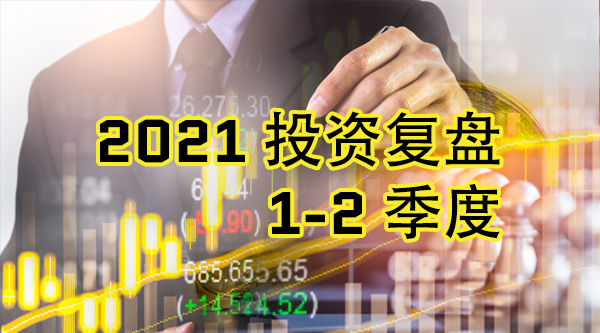
<style>
.page{position:relative;width:600px;height:333px}
.page>*{position:absolute;margin:0}
.t1{font:60px "Quantico-Bold";color:#000000}
.t2{font:60px "AdobeHeitiStd-Regular";color:#000000}
</style>
<div class="page">
<p class="t1" style="left:100px;top:111px;width:400px;height:56px">2021 <span class="t2">投资复盘</span></p>
<p class="t1" style="left:272px;top:183px;width:228px;height:56px">1-2 <span class="t2">季度</span></p>
</div>
